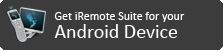
<style>
.page{position:relative;width:223px;height:50px;background:#3c3c3c}
.page>*{position:absolute;margin:0}
.t1{font:12px "Calibri";color:#ffffff}
.t2{font:20px "Calibri";color:#ffffff}
</style>
<div class="page">
<p class="t1" style="left:54px;top:12px;width:131px;height:10px">Get iRemote Suite for your</p>
<p class="t2" style="left:54px;top:24px;width:123px;height:14px">Android Device</p>
</div>
